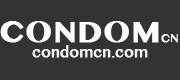
<style>
.page{position:relative;width:180px;height:80px;background:#333333}
.page>*{position:absolute;margin:0}
.t1{font:42px "SinhalaMN-Bold";letter-spacing:0.005em;color:#ffffff;font-weight:bold}
.t2{font:16px "SinhalaMN";letter-spacing:0.005em;color:#f7faf8;font-weight:bold}
.t3{font:21px "SinhalaMN";letter-spacing:0.005em;color:#f6f3f3;font-weight:bold}
</style>
<div class="page">
<p class="t1" style="left:0px;top:21px;width:178px;height:22px">CONDOM<span class="t2">CN</span></p>
<p class="t3" style="left:32px;top:45px;width:116px;height:13px">condomcn.com</p>
</div>
